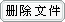
<style>
.page{position:relative;width:65px;height:22px;background:#f8f8f8}
.page>*{position:absolute;margin:0}
.t1{font:12px "SimSun";letter-spacing:0.2em;color:#000000}
</style>
<div class="page">
<p class="t1" style="left:6px;top:5px;width:54px;height:11px">删除文件</p>
</div>
